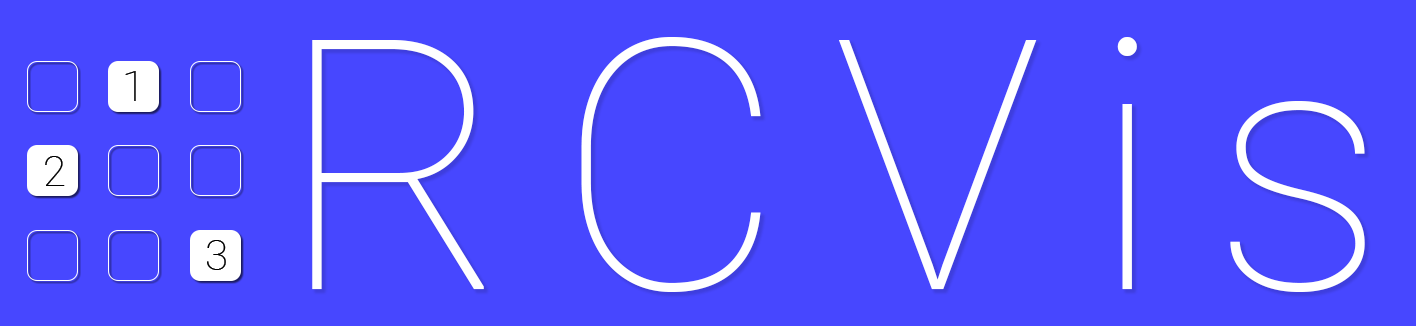
<style>
.page{position:relative;width:1416px;height:326px;background:#4747ff}
.page>*{position:absolute;margin:0}
.t1{font:349.8px "Roboto-Thin";letter-spacing:0.14em;color:#ffffff}
.t2{font:42.2px "Roboto-Thin";letter-spacing:0.14em;color:#000000}
</style>
<div class="page">
<p class="t1" style="left:312px;top:37px;width:1053px;height:255px">RCVis</p>
<p class="t2" style="left:125px;top:71px;width:11px;height:30px">1</p>
<p class="t2" style="left:45px;top:156px;width:20px;height:30px">2</p>
<p class="t2" style="left:207px;top:240px;width:19px;height:30px">3</p>
</div>
